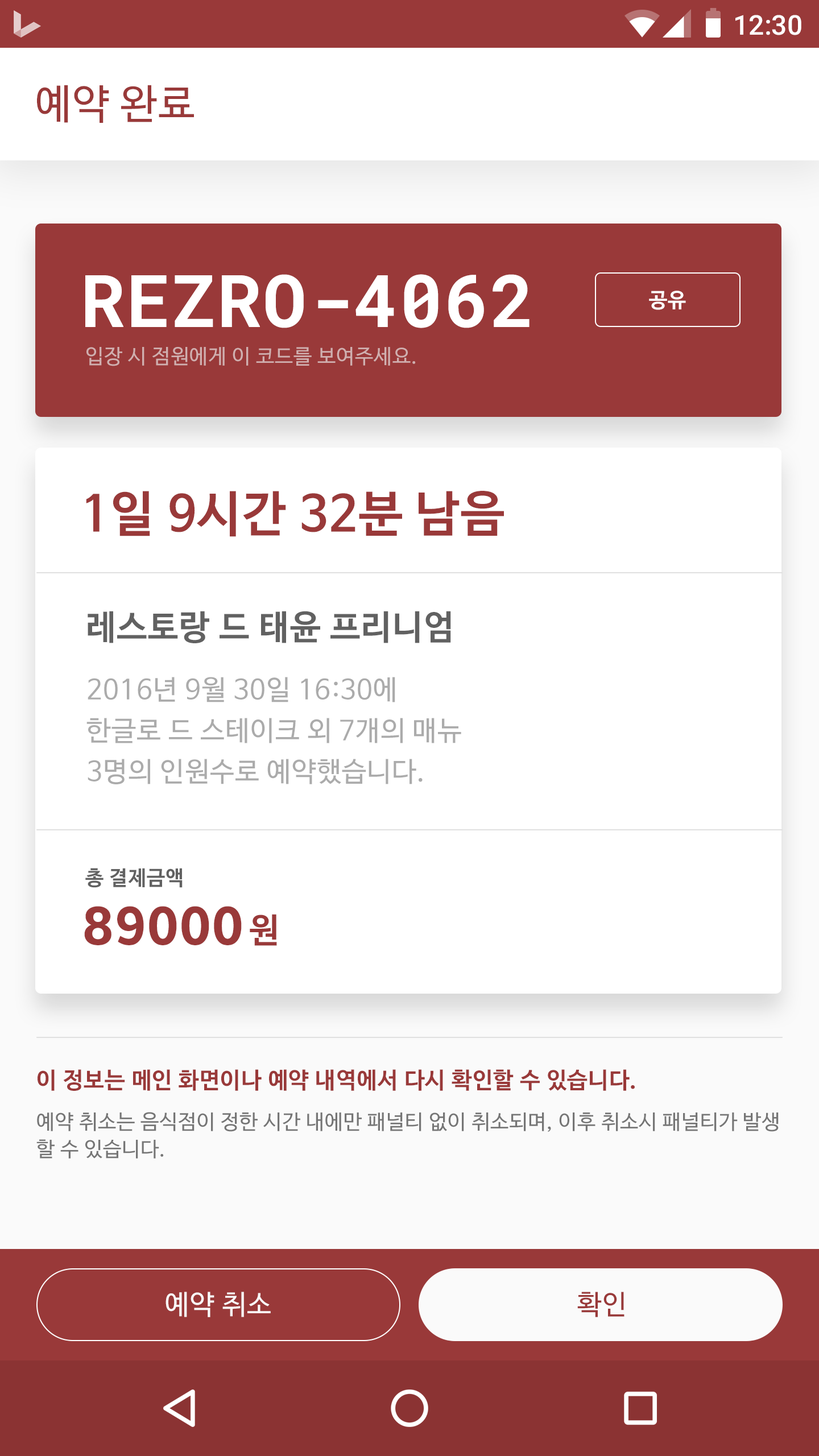
<style>
.page{position:relative;width:819px;height:1456px;background:#ffffff}
.page>*{position:absolute;margin:0}
.t1{font:27.3px "Roboto-Medium";color:#ffffff}
.t2{font:40.9px "NanumBarunGothic";letter-spacing:0.025em;color:#993939}
.t3{font:72.8px "RobotoMono-Bold";letter-spacing:0.025em;color:#ffffff}
.t4{font:20.5px "NanumBarunGothicBold";letter-spacing:0.025em;color:#ffffff}
.t5{font:20.5px "NanumBarunGothic";letter-spacing:0.025em;color:#d0afaf}
.t6{font:48.9px "NanumBarunGothicBold";letter-spacing:0.025em;color:#993939}
.t7{font:34.1px "NanumBarunGothicBold";letter-spacing:0.025em;color:#616161}
.t8{font:27.3px/40.9px "NanumBarunGothic";letter-spacing:0.025em;color:#ababab}
.t9{font:20.5px "NanumBarunGothicBold";letter-spacing:0.025em;color:#616161}
.t10{font:54.6px "BreezeSans-Bold";letter-spacing:0.025em;color:#993939}
.t11{font:34.1px "NanumBarunGothicBold";letter-spacing:0.025em;color:#993939}
.t12{font:20.5px/40.9px "NanumBarunGothic";letter-spacing:0.025em;color:#757575}
.t13{font:22.7px/54.6px "NanumBarunGothicBold";letter-spacing:0.025em;color:#993939}
.t14{font:20.5px/27.3px "NanumBarunGothic";letter-spacing:0.025em;color:#757575}
.t15{font:27.3px "NanumBarunGothic";letter-spacing:0.025em;color:#fafafa}
.t16{font:27.3px "NanumBarunGothic";letter-spacing:0.025em;color:#993939}
</style>
<div class="page">
<p class="t1" style="left:735px;top:15px;width:66px;height:20px">12:30</p>
<p class="t2" style="left:37px;top:85px;width:157px;height:38px">예약 완료</p>
<p class="t3" style="left:85px;top:274px;width:444px;height:54px">REZRO-4062</p>
<p class="t4" style="left:649px;top:291px;width:37px;height:19px">공유</p>
<p class="t5" style="left:86px;top:347px;width:330px;height:19px">입장 시 점원에게 이 코드를 보여주세요.</p>
<p class="t6" style="left:86px;top:491px;width:418px;height:46px">1일 9시간 32분 남음</p>
<p class="t7" style="left:88px;top:611px;width:363px;height:32px">레스토랑 드 태윤 프리니엄</p>
<p class="t8" style="left:86px;top:677px;width:375px;height:107px">2016년 9월 30일 16:30에<br>한글로 드 스테이크 외 7개의 매뉴<br>3명의 인원수로 예약했습니다.</p>
<p class="t9" style="left:85px;top:868px;width:98px;height:20px">총 결제금액</p>
<p class="t10" style="left:84px;top:906px;width:158px;height:39px">89000</p>
<p class="t11" style="left:250px;top:914px;width:27px;height:32px">원</p>
<p class="t12" style="left:36px;top:1069px;width:743px;height:90px"><span class="t13">이 정보는 메인 화면이나 예약 내역에서 다시 확인할 수 있습니다.<br></span>예약 취소는 음식점이 정한 시간 내에만 패널티 없이 취소되며, 이후 취소시 패널티가 발생<br><span class="t14">할 수 있습니다.</span></p>
<p class="t15" style="left:166px;top:1292px;width:105px;height:25px">예약 취소</p>
<p class="t16" style="left:577px;top:1292px;width:47px;height:25px">확인</p>
</div>
